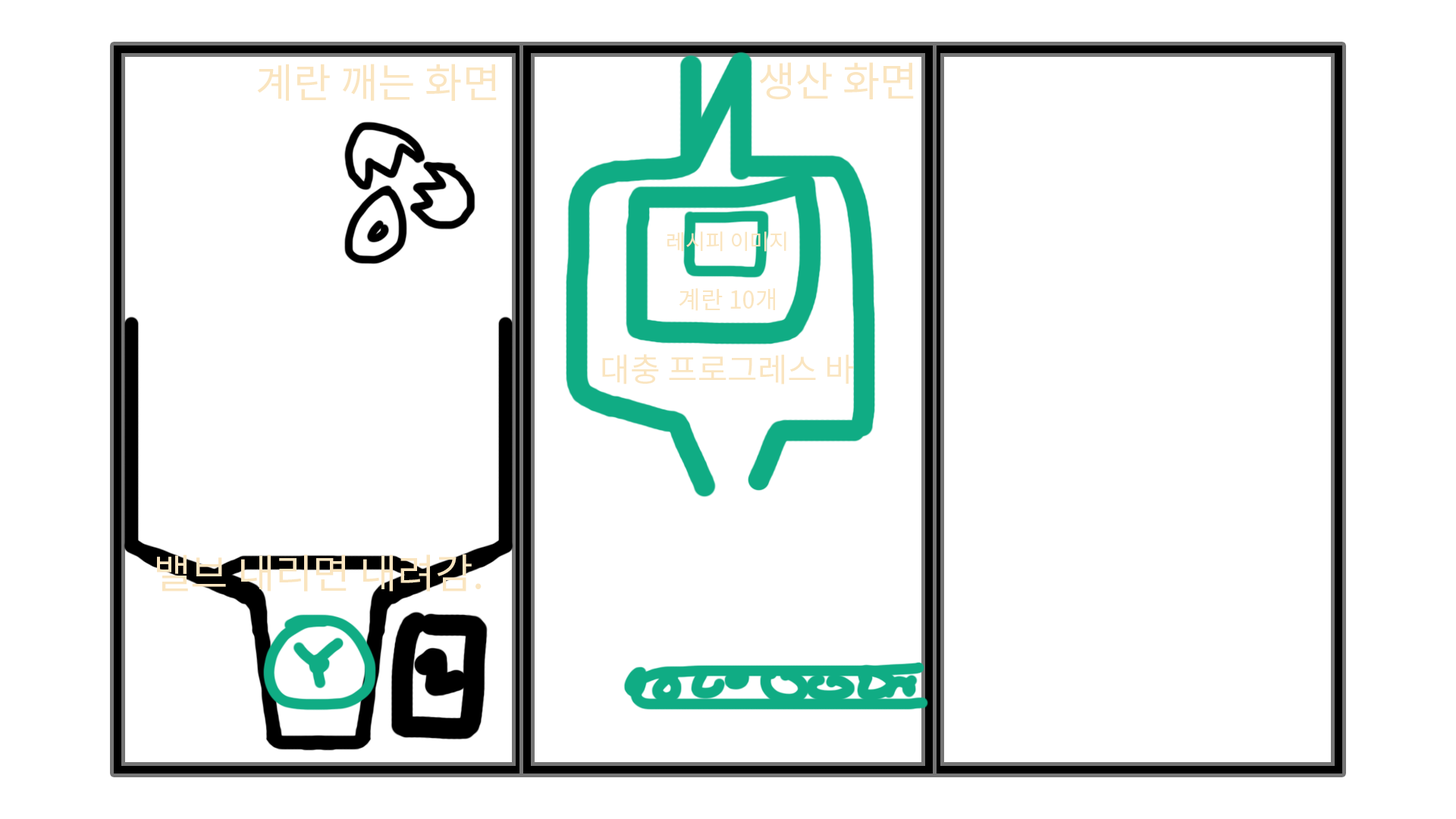
<style>
.page{position:relative;width:1456px;height:819px;background:#ffffff}
.page>*{position:absolute;margin:0}
.t1{font:40.9px "NotoSansCJKkr-Regular";color:#fae5c0}
.t2{font:21.4px "NotoSansCJKkr-Regular";color:#fae5c0}
.t3{font:24.4px "NotoSansCJKkr-Regular";color:#fae5c0}
.t4{font:32.6px "NotoSansCJKkr-Regular";color:#fae5c0}
</style>
<div class="page">
<p class="t1" style="left:257px;top:64px;width:240px;height:37px">계란 깨는 화면</p>
<p class="t1" style="left:760px;top:62px;width:154px;height:37px">생산 화면</p>
<p class="t2" style="left:667px;top:231px;width:119px;height:21px">레시피 이미지</p>
<p class="t3" style="left:679px;top:288px;width:96px;height:23px">계란 10개</p>
<p class="t4" style="left:602px;top:354px;width:252px;height:30px">대충 프로그레스 바</p>
<p class="t1" style="left:157px;top:554px;width:325px;height:37px">밸브 내리면 내려감.</p>
</div>
